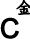
<style>
.page{position:relative;width:30px;height:39px;background:#ffffff}
.page>*{position:absolute;margin:0}
.t1{font:27px "ArialMT";color:#000000;font-weight:bold}
</style>
<div class="page">
<p class="t1" style="left:0px;top:17px;width:19px;height:22px">C</p>
</div>
